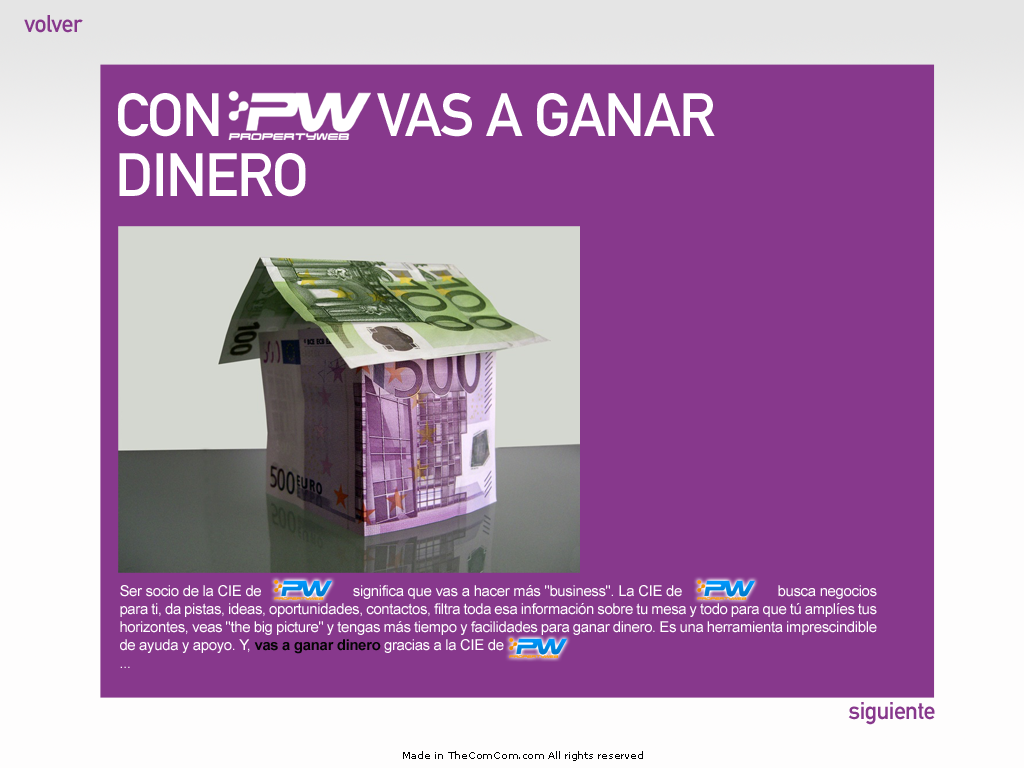
<style>
.page{position:relative;width:1024px;height:768px;background:#87388c}
.page>*{position:absolute;margin:0}
.t1{font:24px "DINMittelschriftStd";letter-spacing:-0.025em;color:#87388c}
.t2{font:60px/60px "DINMittelschriftStd";letter-spacing:-0.025em;color:#ffffff;text-transform:uppercase}
.t3{font:15px "ArialMT";letter-spacing:-0.025em;color:#ffffff}
.t4{font:15px "Arial-BoldMT";letter-spacing:-0.025em;color:#040404}
.t5{font:10px "MSReferenceSansSerif";letter-spacing:-0.025em;color:#010101}
</style>
<div class="page">
<p class="t1" style="left:24px;top:15px;width:59px;height:18px">volver</p>
<p class="t2" style="left:118px;top:93px;width:597px;height:104px">con            vas a ganar dinero</p>
<p class="t3" style="left:120px;top:585px;width:757px;height:83px;text-align:justify">Ser socio de la CIE de                       significa que vas a hacer más "business". La CIE de                        busca negocios para ti, da pistas, ideas, oportunidades, contactos, filtra toda esa información sobre tu mesa y todo para que tú amplíes tus horizontes, veas "the big picture" y tengas más tiempo y facilidades para ganar dinero. Es una herramienta imprescindible de ayuda y apoyo. Y, <span class="t4">vas a ganar dinero</span> gracias a la CIE de <br>...</p>
<p class="t1" style="left:848px;top:702px;width:87px;height:23px">siguiente</p>
<p class="t5" style="left:403px;top:751px;width:240px;height:10px">Made in TheComCom.com All rights reserved</p>
</div>
